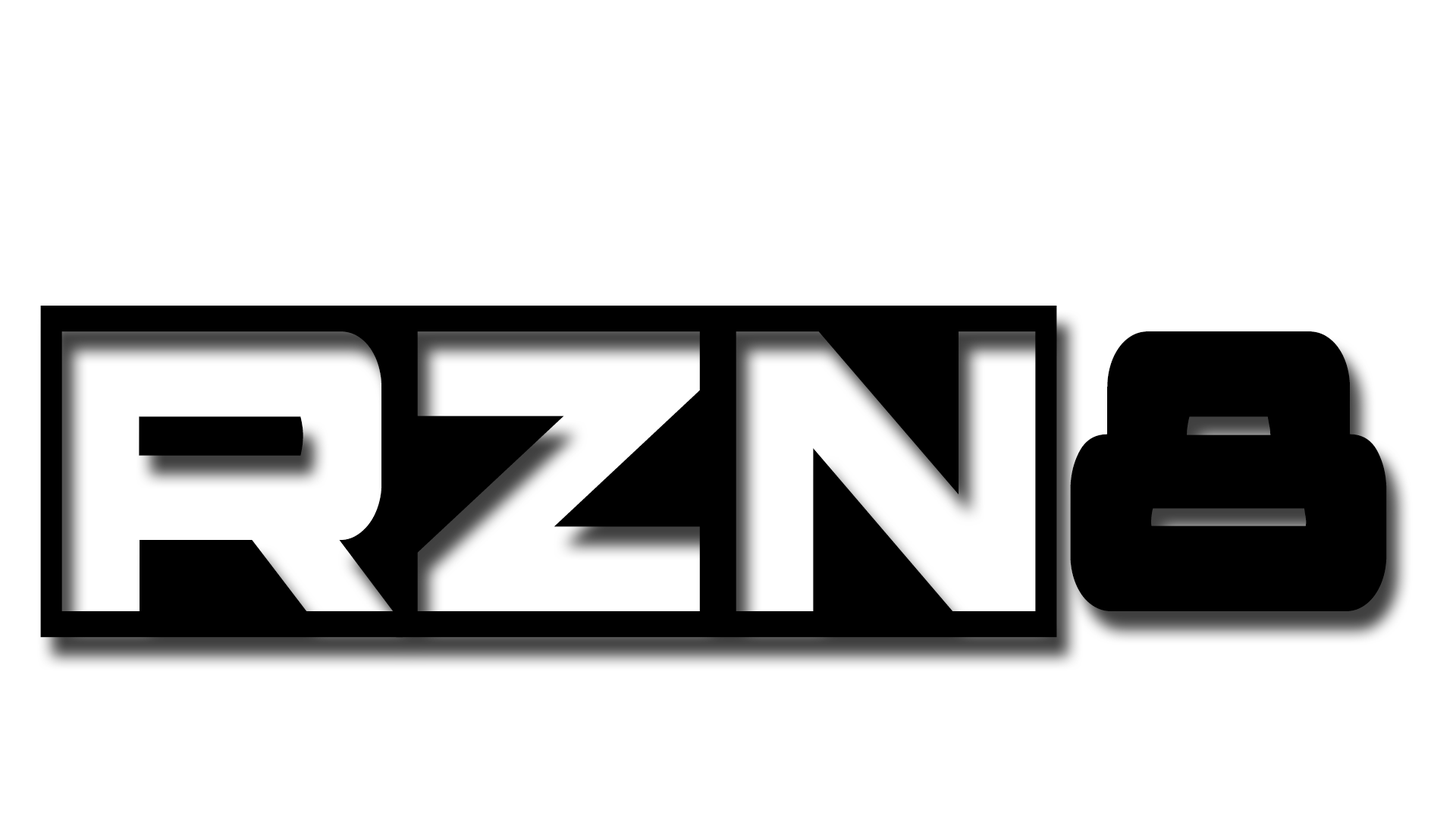
<style>
.page{position:relative;width:1456px;height:819px;background:#ffffff}
.page>*{position:absolute;margin:0}
.t1{font:587.8px "voxBOXExpanded";color:#000000;scale:0.72 1}
</style>
<div class="page">
<p class="t1" style="left:40px;top:306px;width:1347px;height:332px">RZN8</p>
</div>
